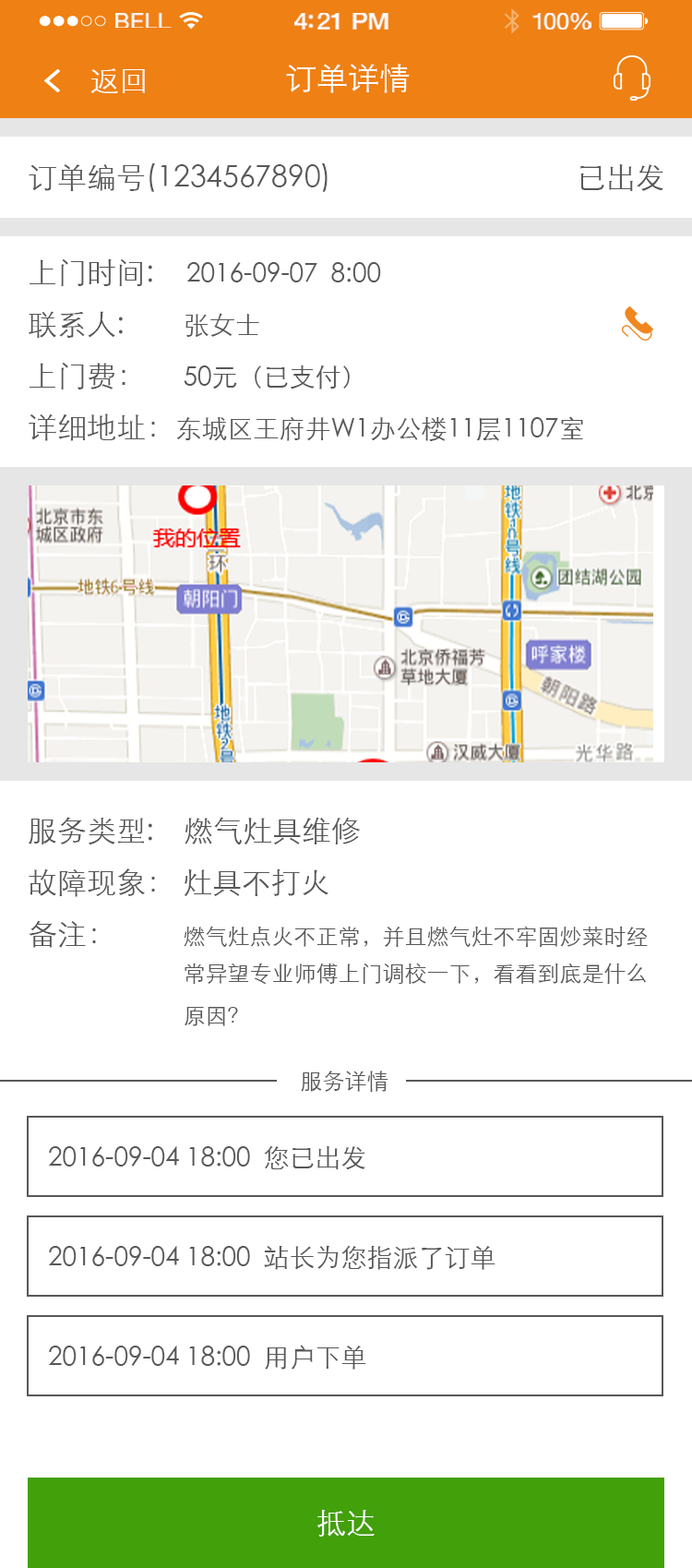
<style>
.page{position:relative;width:692px;height:1568px;background:#ffffff}
.page>*{position:absolute;margin:0}
.t1{font:21.5px "HelveticaNeue";letter-spacing:0.02em;color:#ffffff;scale:1.06 1}
.t2{font:23.3px "HelveticaNeue-Medium";letter-spacing:-0.02em;color:#ffffff;scale:1.06 1}
.t3{font:22.4px "HelveticaNeue";letter-spacing:-0.02em;color:#ffffff;scale:1.06 1}
.t4{font:31.4px "STXihei";color:#ffffff}
.t5{font:29.5px "STXihei";color:#ffffff}
.t6{font:29.5px "STXihei";color:#595757}
.t7{font:25.8px/51.7px "STXihei";color:#595757}
.t8{font:29.5px/51.7px "STXihei";color:#595757}
.t9{font:25.8px "STXihei";color:#595757}
.t10{font:22.1px/42.5px "STXihei";color:#595757}
.t11{font:29.5px/42.5px "STXihei";color:#595757}
.t12{font:22.1px/51.7px "STXihei";color:#595757}
.t13{font:22.6px "STXihei";color:#595757}
</style>
<div class="page">
<p class="t1" style="left:115px;top:13px;width:57px;height:15px">BELL</p>
<p class="t2" style="left:294px;top:13px;width:95px;height:17px">4:21 PM</p>
<p class="t3" style="left:533px;top:13px;width:59px;height:17px">100%</p>
<p class="t4" style="left:286px;top:64px;width:124px;height:29px">订单详情</p>
<p class="t5" style="left:90px;top:68px;width:55px;height:25px">返回</p>
<p class="t6" style="left:29px;top:163px;width:299px;height:29px">订单编号(1234567890)</p>
<p class="t6" style="left:581px;top:164px;width:83px;height:27px">已出发</p>
<p class="t7" style="left:29px;top:258px;width:554px;height:183px"><span class="t8">上门时间:<br>联系人:        </span>张女士<br><span class="t8">上门费：     </span>50元（已支付）<br><span class="t8">详细地址：</span>东城区王府井W1办公楼11层1107室</p>
<p class="t9" style="left:186px;top:262px;width:195px;height:20px">2016-09-07  8:00</p>
<p class="t10" style="left:29px;top:817px;width:619px;height:209px"><span class="t8">服务类型:    燃气灶具维修<br>故障现象： 灶具不打火<br></span><span class="t11">备注：         </span>燃气灶点火不正常，并且燃气灶不牢固炒菜时经<br>                            常异望专业师傅上门调校一下，看看到底是什么<br>                            原因<span class="t12">？</span></p>
<p class="t13" style="left:301px;top:1071px;width:88px;height:21px">服务详情</p>
<p class="t9" style="left:48px;top:1145px;width:317px;height:25px">2016-09-04 18:00  您已出发</p>
<p class="t9" style="left:48px;top:1245px;width:448px;height:25px">2016-09-04 18:00  站长为您指派了订单</p>
<p class="t9" style="left:48px;top:1345px;width:318px;height:25px">2016-09-04 18:00  用户下单</p>
<p class="t5" style="left:317px;top:1510px;width:58px;height:27px">抵达</p>
</div>
